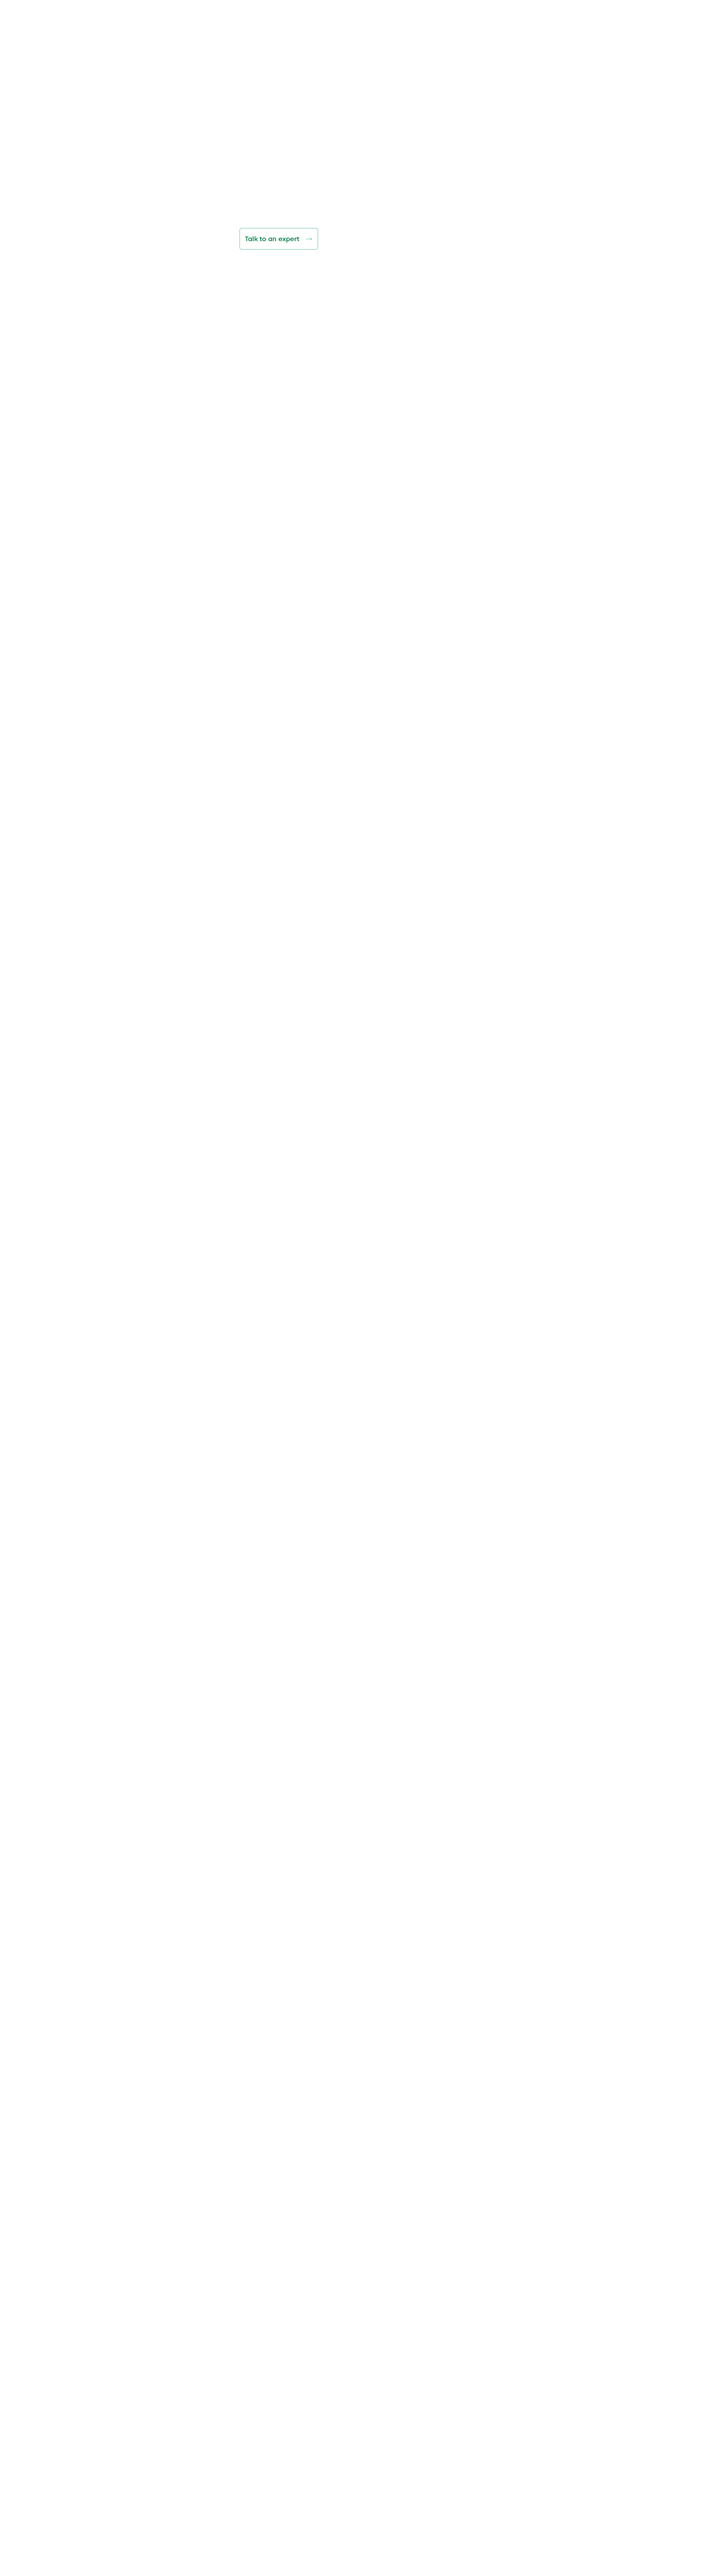
<style>
.page{position:relative;width:724px;height:2576px;background:#ffffff}
.page>*{position:absolute;margin:0}
.t1{font:6.5px "CarosMedium";color:#018245}
</style>
<div class="page">
<p class="t1" style="left:245px;top:236px;width:54px;height:7px">Talk to an expert</p>
</div>
